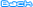
<style>
.page{position:relative;width:33px;height:7px;background:#ffffff}
.page>*{position:absolute;margin:0}
.t1{font:8px "ThundergodII";color:#ffffff}
</style>
<div class="page">
<p class="t1" style="left:1px;top:1px;width:31px;height:5px">Back</p>
</div>
